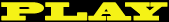
<style>
.page{position:relative;width:169px;height:22px;background:#f5f216}
.page>*{position:absolute;margin:0}
.t1{font:24px "BlackoakStd";color:#f5f216}
</style>
<div class="page">
<p class="t1" style="left:1px;top:2px;width:167px;height:19px">PLAY</p>
</div>
